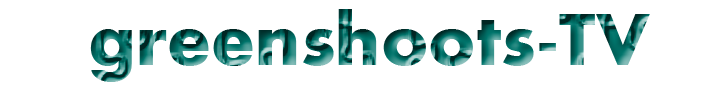
<style>
.page{position:relative;width:728px;height:89px;background:#ffffff}
.page>*{position:absolute;margin:0}
.t1{font:77px "Aharoni-Bold"}
</style>
<div class="page">
<p class="t1" style="left:90px;top:9px;width:560px;height:73px">greenshoots-TV</p>
</div>
